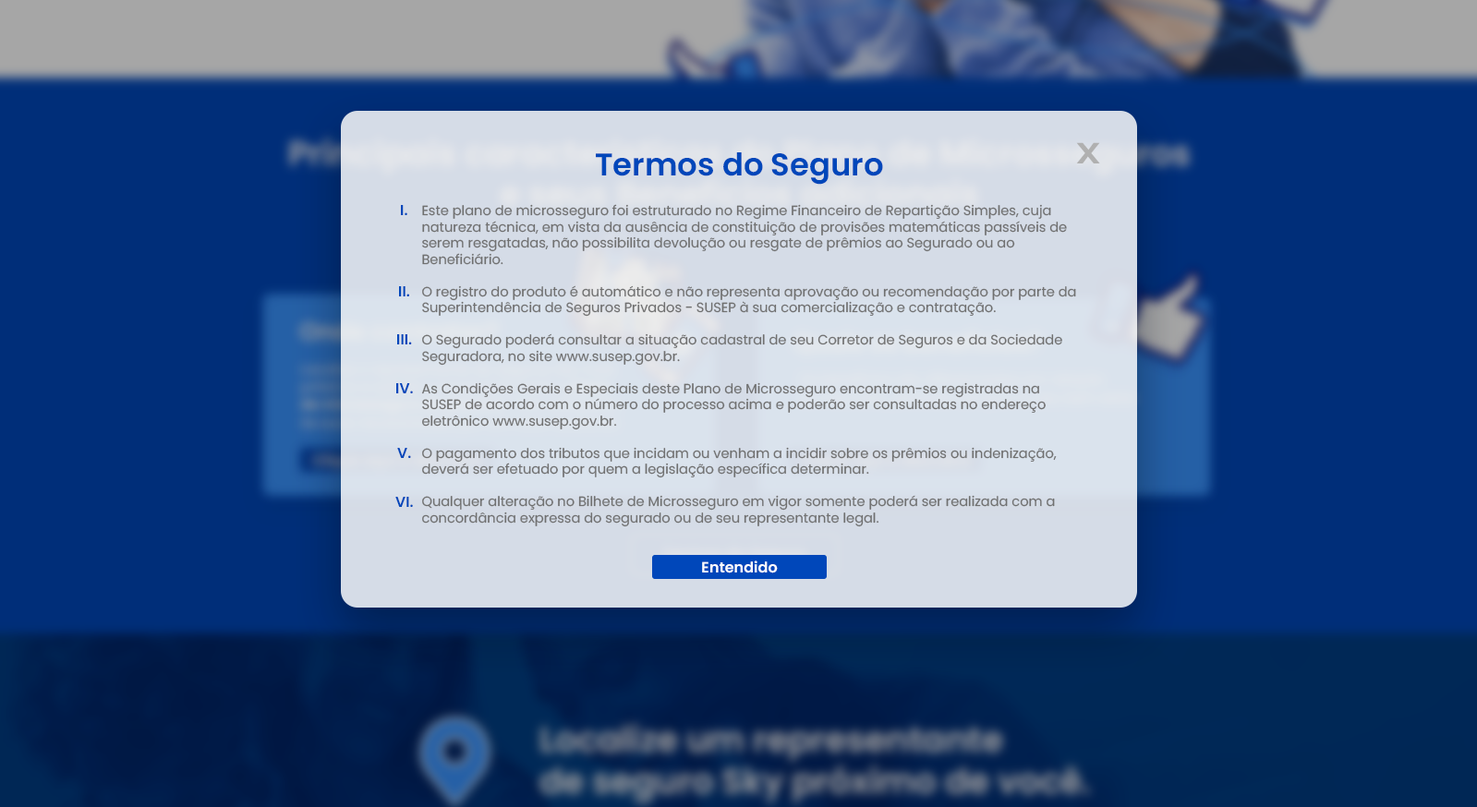
<style>
.page{position:relative;width:1477px;height:807px;background:#002e79}
.page>*{position:absolute;margin:0}
.t1{font:29.5px "Poppins-SemiBold";color:#b0b0b0;scale:1.28 1}
.t2{font:31.3px "Poppins-SemiBold";color:#0047ba}
.t3{font:14.4px "Poppins-SemiBold";color:#0047ba}
.t4{font:13.5px "Poppins-Regular";color:#707070}
.t5{font:14.8px "Poppins-SemiBold";color:#ffffff}
</style>
<div class="page">
<p class="t1" style="left:1076px;top:142px;width:24px;height:21px">X</p>
<p class="t2" style="left:596px;top:152px;width:287px;height:33px">Termos do Seguro</p>
<p class="t3" style="left:401px;top:205px;width:6px;height:10px">I.</p>
<p class="t4" style="left:421px;top:204px;width:655px;height:323px">Este plano de microsseguro foi estruturado no Regime Financeiro de Repartição Simples, cuja natureza técnica, em vista da ausência de constituição de provisões matemáticas passíveis de serem resgatadas, não possibilita devolução ou resgate de prêmios ao Segurado ou ao Beneficiário.<br><br>O registro do produto é automático e não representa aprovação ou recomendação por parte da Superintendência de Seguros Privados - SUSEP à sua comercialização e contratação.<br><br>O Segurado poderá consultar a situação cadastral de seu Corretor de Seguros e da Sociedade Seguradora, no site www.susep.gov.br.<br><br>As Condições Gerais e Especiais deste Plano de Microsseguro encontram-se registradas na SUSEP de acordo com o número do processo acima e poderão ser consultadas no endereço eletrônico www.susep.gov.br.<br><br>O pagamento dos tributos que incidam ou venham a incidir sobre os prêmios ou indenização, deverá ser efetuado por quem a legislação específica determinar.<br><br>Qualquer alteração no Bilhete de Microsseguro em vigor somente poderá ser realizada com a concordância expressa do segurado ou de seu representante legal.</p>
<p class="t3" style="left:399px;top:286px;width:10px;height:11px">II.</p>
<p class="t3" style="left:397px;top:334px;width:15px;height:11px">III.</p>
<p class="t3" style="left:396px;top:383px;width:17px;height:11px">IV.</p>
<p class="t3" style="left:397px;top:448px;width:14px;height:10px">V.</p>
<p class="t3" style="left:395px;top:497px;width:18px;height:10px">VI.</p>
<p class="t5" style="left:702px;top:561px;width:76px;height:13px">Entendido</p>
</div>
